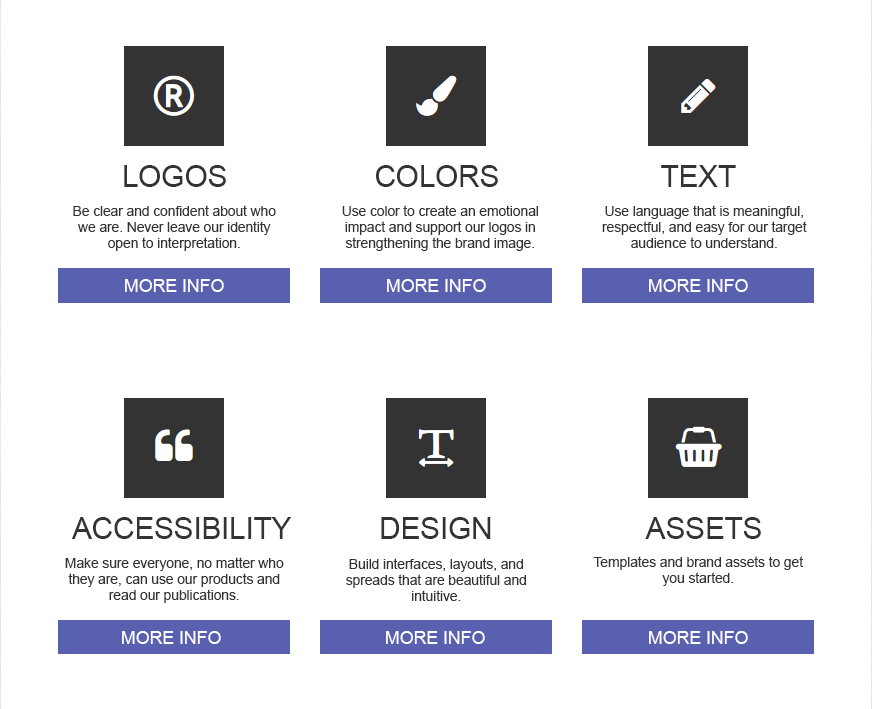
<style>
.page{position:relative;width:872px;height:709px;background:#ffffff}
.page>*{position:absolute;margin:0}
.t1{font:30px "ArialMT";letter-spacing:-0.01em;color:#333333}
.t2{font:14px/16px "ArialMT";letter-spacing:-0.01em;color:#333333}
.t3{font:18px "ArialMT";letter-spacing:-0.01em;color:#fefefe}
</style>
<div class="page">
<p class="t1" style="left:124px;top:165px;width:102px;height:22px">LOGOS</p>
<p class="t1" style="left:376px;top:165px;width:122px;height:22px">COLORS</p>
<p class="t1" style="left:661px;top:165px;width:75px;height:22px">TEXT</p>
<p class="t2" style="left:73px;top:205px;width:203px;height:46px;text-align:center">Be clear and confident about who we are. Never leave our identity open to interpretation.</p>
<p class="t2" style="left:342px;top:205px;width:196px;height:46px;text-align:center">Use color to create an emotional impact and support our logos in strengthening the brand image.</p>
<p class="t2" style="left:602px;top:205px;width:205px;height:43px;text-align:center">Use language that is meaningful, respectful, and easy for our target audience to understand.</p>
<p class="t3" style="left:125px;top:279px;width:99px;height:13px">MORE INFO</p>
<p class="t3" style="left:387px;top:279px;width:99px;height:13px">MORE INFO</p>
<p class="t3" style="left:649px;top:279px;width:99px;height:13px">MORE INFO</p>
<p class="t1" style="left:71px;top:517px;width:221px;height:22px">ACCESSIBILITY</p>
<p class="t1" style="left:381px;top:517px;width:110px;height:22px">DESIGN</p>
<p class="t1" style="left:645px;top:517px;width:116px;height:22px">ASSETS</p>
<p class="t2" style="left:65px;top:557px;width:219px;height:46px;text-align:center">Make sure everyone, no matter who they are, can use our products and read our publications.</p>
<p class="t2" style="left:346px;top:558px;width:180px;height:43px;text-align:center">Build interfaces, layouts, and spreads that are beautiful and intuitive.</p>
<p class="t2" style="left:593px;top:556px;width:211px;height:30px;text-align:center">Templates and brand assets to get you started.</p>
<p class="t3" style="left:122px;top:631px;width:99px;height:13px">MORE INFO</p>
<p class="t3" style="left:386px;top:631px;width:99px;height:13px">MORE INFO</p>
<p class="t3" style="left:649px;top:631px;width:99px;height:13px">MORE INFO</p>
</div>
